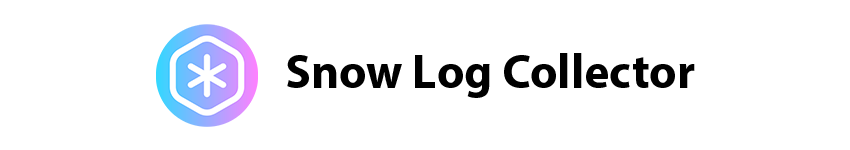
<style>
.page{position:relative;width:850px;height:150px;background:#ffffff}
.page>*{position:absolute;margin:0}
.t1{font:48px "MyriadPro-Bold";color:#000000}
</style>
<div class="page">
<p class="t1" style="left:287px;top:53px;width:408px;height:45px">Snow Log Collector</p>
</div>
